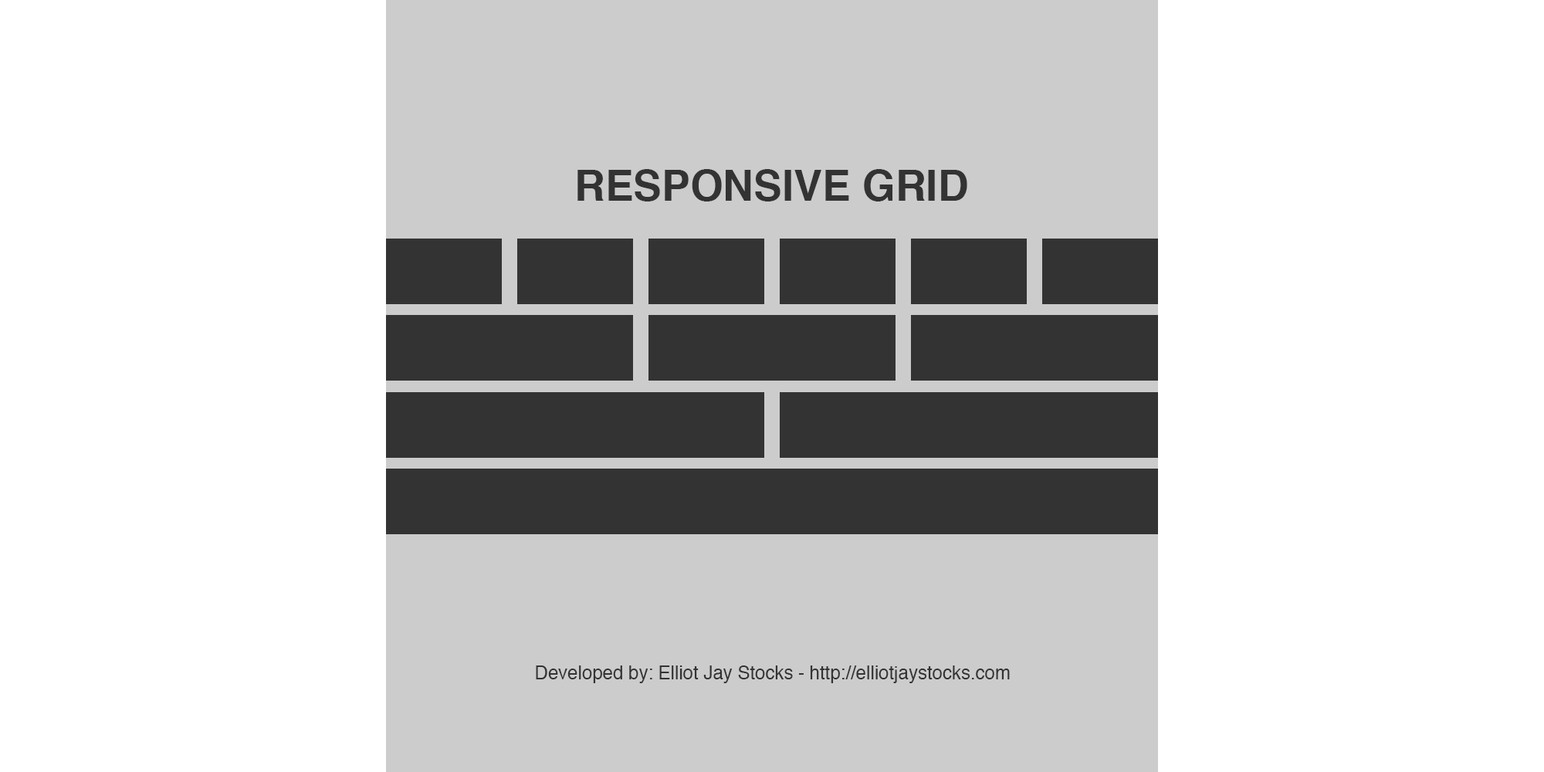
<style>
.page{position:relative;width:1544px;height:772px;background:#ffffff}
.page>*{position:absolute;margin:0}
.t1{font:42.5px "Helvetica-Bold";color:#333333}
.t2{font:18.5px "Helvetica";color:#333333}
</style>
<div class="page">
<p class="t1" style="left:578px;top:169px;width:390px;height:33px">RESPONSIVE GRID</p>
<p class="t2" style="left:536px;top:666px;width:474px;height:17px">Developed by: Elliot Jay Stocks - http://elliotjaystocks.com</p>
</div>
